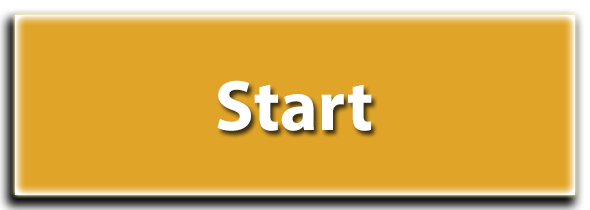
<style>
.page{position:relative;width:590px;height:210px;background:#e0a528}
.page>*{position:absolute;margin:0}
.t1{font:72px "MyriadPro-Bold";color:#ffffff}
</style>
<div class="page">
<p class="t1" style="left:217px;top:80px;width:155px;height:51px">Start</p>
</div>
